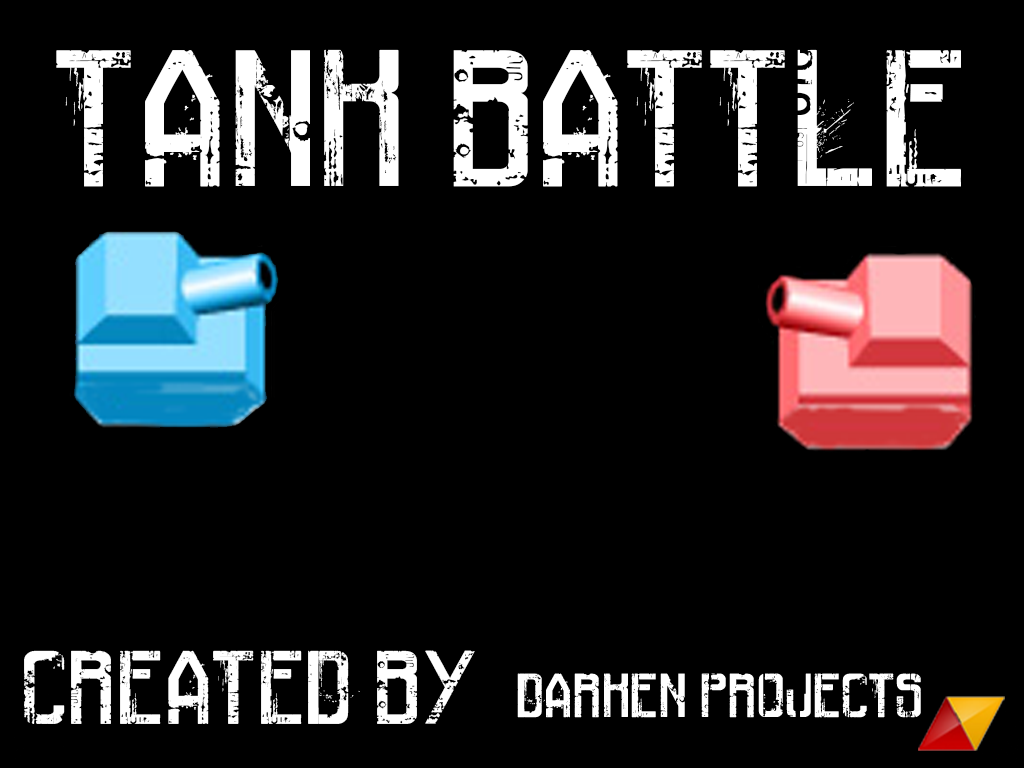
<style>
.page{position:relative;width:1024px;height:768px;background:#000000}
.page>*{position:absolute;margin:0}
.t1{font:101px "RailwayToHells";color:#ffffff}
.t2{font:32px "RailwayToHells";color:#ffffff}
.t3{font:54px "RailwayToHells";color:#ffffff}
</style>
<div class="page">
<p class="t1" style="left:56px;top:49px;width:905px;height:138px">TANK BATTLE</p>
<p class="t2" style="left:24px;top:650px;width:897px;height:74px"><span class="t3">CREATED BY</span>   DARKEN PROJECTS</p>
</div>
